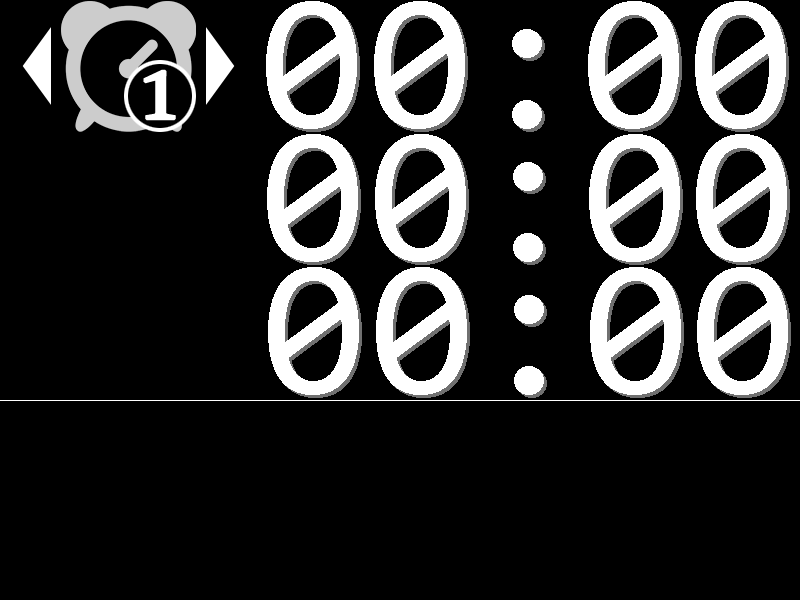
<style>
.page{position:relative;width:800px;height:600px;background:#000000}
.page>*{position:absolute;margin:0}
.t1{font:195px "Consolas";color:#ffffff}
.t2{font:104.6px "SitkaBanner";color:#ffffff;font-weight:bold}
</style>
<div class="page">
<p class="t1" style="left:266px;top:1px;width:520px;height:128px">00:00</p>
<p class="t1" style="left:269px;top:4px;width:520px;height:128px">00:00</p>
<p class="t2" style="left:143px;top:69px;width:33px;height:52px">1</p>
<p class="t1" style="left:267px;top:134px;width:520px;height:128px">00:00</p>
<p class="t1" style="left:270px;top:137px;width:520px;height:128px">00:00</p>
<p class="t1" style="left:268px;top:267px;width:520px;height:128px">00:00</p>
<p class="t1" style="left:271px;top:270px;width:520px;height:128px">00:00</p>
</div>
